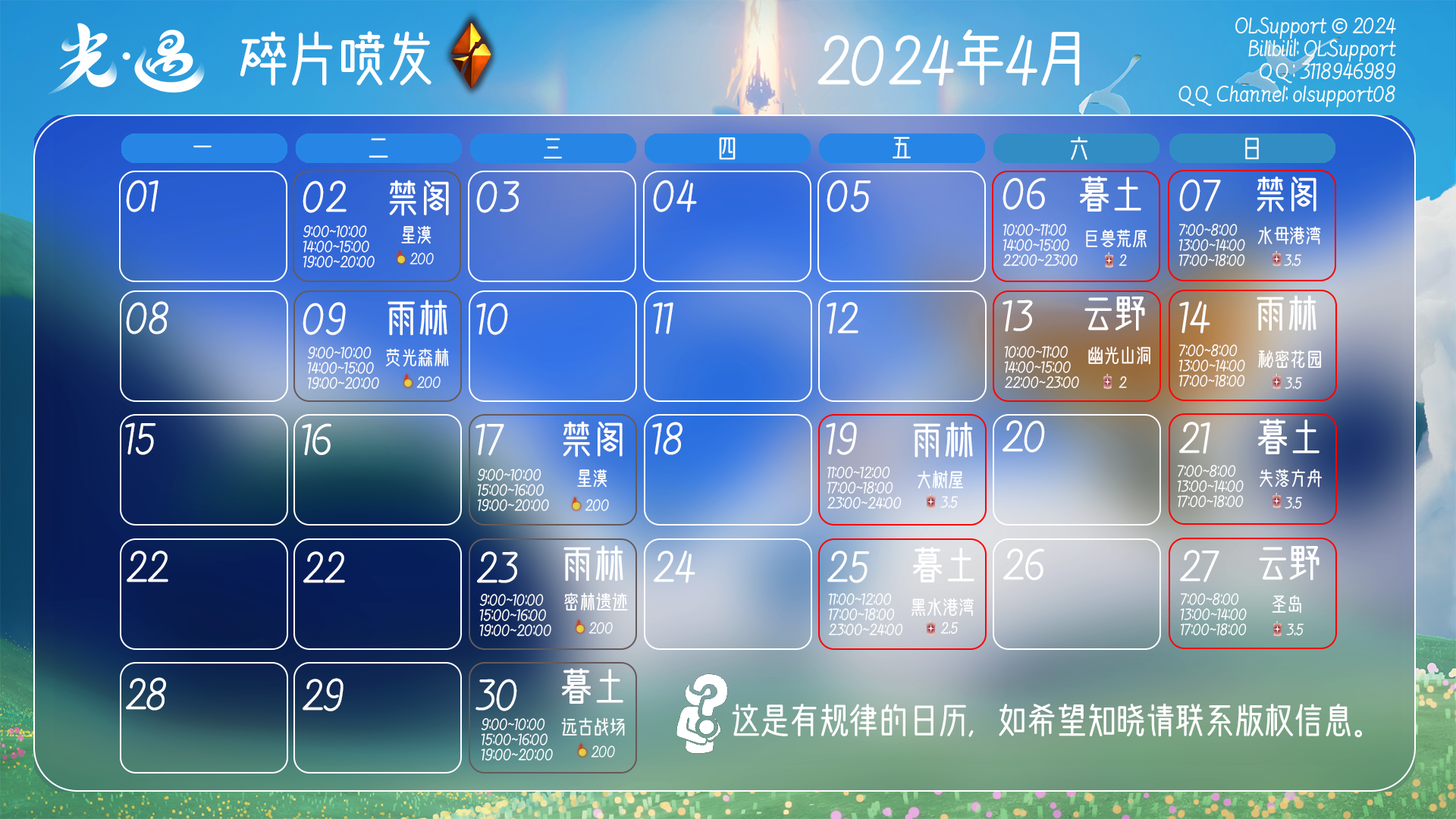
<style>
.page{position:relative;width:1456px;height:819px}
.page>*{position:absolute;margin:0}
.t1{font:19px/22.7px "WenCang-Regular";color:#ffffff}
.t2{font:59.9px "WenCang-Regular";color:#ffffff}
.t3{font:57.9px "WenCang-Regular";color:#ffffff}
.t4{font:25px "WenCang-Regular";color:#ffffff}
.t5{font:37.9px "WenCang-Regular";color:#ffffff}
.t6{font:13.6px/15.2px "WenCang-Regular";color:#ffffff}
.t7{font:19px "WenCang-Regular";color:#ffffff}
.t8{font:13.6px "WenCang-Regular";color:#ffffff}
.t9{font:34.9px "WenCang-Regular";color:#ffffff}
</style>
<div class="page">
<p class="t1" style="left:1178px;top:17px;width:218px;height:91px;text-align:right">OLSupport © 2024<br>Bilibili|: OLSupport<br>QQ: 3118946989<br>QQ Channel: olsupport08</p>
<p class="t2" style="left:817px;top:30px;width:263px;height:56px">2024年4月</p>
<p class="t3" style="left:240px;top:31px;width:191px;height:55px">碎片喷发</p>
<p class="t4" style="left:719px;top:137px;width:17px;height:23px">四</p>
<p class="t4" style="left:893px;top:136px;width:18px;height:22px">五</p>
<p class="t4" style="left:1071px;top:136px;width:16px;height:24px">六</p>
<p class="t4" style="left:1245px;top:137px;width:14px;height:22px">日</p>
<p class="t4" style="left:193px;top:146px;width:19px;height:2px">一</p>
<p class="t4" style="left:369px;top:138px;width:19px;height:20px">二</p>
<p class="t4" style="left:544px;top:138px;width:18px;height:20px">三</p>
<p class="t5" style="left:126px;top:180px;width:32px;height:32px">01</p>
<p class="t5" style="left:303px;top:180px;width:44px;height:33px">02</p>
<p class="t5" style="left:389px;top:180px;width:60px;height:36px">禁阁</p>
<p class="t5" style="left:476px;top:180px;width:43px;height:33px">03</p>
<p class="t5" style="left:653px;top:180px;width:44px;height:32px">04</p>
<p class="t5" style="left:827px;top:180px;width:44px;height:32px">05</p>
<p class="t5" style="left:1003px;top:177px;width:43px;height:33px">06</p>
<p class="t5" style="left:1080px;top:176px;width:61px;height:36px">暮土</p>
<p class="t5" style="left:1179px;top:179px;width:42px;height:33px">07</p>
<p class="t5" style="left:1257px;top:176px;width:59px;height:36px">禁阁</p>
<p class="t6" style="left:303px;top:225px;width:72px;height:43px">9:00~10:00<br>14:00~15:00<br>19:00~20:00</p>
<p class="t7" style="left:401px;top:225px;width:30px;height:19px">星漠</p>
<p class="t6" style="left:1003px;top:224px;width:75px;height:42px">10:00~11:00<br>14:00~15:00<br>22:00~23:00</p>
<p class="t7" style="left:1086px;top:229px;width:61px;height:19px">巨兽荒原</p>
<p class="t6" style="left:1178px;top:224px;width:67px;height:42px">7:00~8:00<br>13:00~14:00<br>17:00~18:00</p>
<p class="t7" style="left:1257px;top:226px;width:64px;height:19px">水母港湾</p>
<p class="t8" style="left:1119px;top:254px;width:8px;height:12px">2</p>
<p class="t8" style="left:1284px;top:254px;width:17px;height:12px">3.5</p>
<p class="t5" style="left:126px;top:301px;width:42px;height:33px">08</p>
<p class="t5" style="left:303px;top:302px;width:43px;height:33px">09</p>
<p class="t5" style="left:388px;top:300px;width:59px;height:36px">雨林</p>
<p class="t5" style="left:476px;top:303px;width:32px;height:32px">10</p>
<p class="t5" style="left:653px;top:302px;width:20px;height:32px">11</p>
<p class="t5" style="left:827px;top:302px;width:31px;height:32px">12</p>
<p class="t5" style="left:1003px;top:300px;width:30px;height:32px">13</p>
<p class="t5" style="left:1084px;top:297px;width:61px;height:34px">云野</p>
<p class="t5" style="left:1179px;top:301px;width:31px;height:33px">14</p>
<p class="t5" style="left:1257px;top:295px;width:59px;height:36px">雨林</p>
<p class="t6" style="left:307px;top:347px;width:72px;height:42px">9:00~10:00<br>14:00~15:00<br>19:00~20:00</p>
<p class="t7" style="left:386px;top:348px;width:63px;height:19px">荧光森林</p>
<p class="t6" style="left:1004px;top:346px;width:75px;height:42px">10:00~11:00<br>14:00~15:00<br>22:00~23:00</p>
<p class="t7" style="left:1088px;top:347px;width:62px;height:18px">幽光山洞</p>
<p class="t6" style="left:1178px;top:344px;width:67px;height:43px">7:00~8:00<br>13:00~14:00<br>17:00~18:00</p>
<p class="t7" style="left:1258px;top:350px;width:64px;height:19px">秘密花园</p>
<p class="t8" style="left:1119px;top:376px;width:8px;height:12px">2</p>
<p class="t8" style="left:1285px;top:377px;width:17px;height:12px">3.5</p>
<p class="t5" style="left:125px;top:422px;width:31px;height:33px">15</p>
<p class="t5" style="left:302px;top:423px;width:29px;height:33px">16</p>
<p class="t5" style="left:475px;top:423px;width:29px;height:33px">17</p>
<p class="t5" style="left:563px;top:421px;width:60px;height:36px">禁阁</p>
<p class="t5" style="left:652px;top:422px;width:30px;height:33px">18</p>
<p class="t5" style="left:826px;top:422px;width:31px;height:33px">19</p>
<p class="t5" style="left:913px;top:422px;width:60px;height:36px">雨林</p>
<p class="t5" style="left:1003px;top:420px;width:42px;height:33px">20</p>
<p class="t5" style="left:1179px;top:422px;width:31px;height:32px">21</p>
<p class="t5" style="left:1258px;top:419px;width:61px;height:35px">暮土</p>
<p class="t6" style="left:477px;top:469px;width:72px;height:42px">9:00~10:00<br>15:00~16:00<br>19:00~20:00</p>
<p class="t7" style="left:577px;top:469px;width:30px;height:19px">星漠</p>
<p class="t6" style="left:827px;top:466px;width:75px;height:43px">11:00~12:00<br>17:00~18:00<br>23:00~24:00</p>
<p class="t7" style="left:918px;top:470px;width:45px;height:19px">大树屋</p>
<p class="t6" style="left:1177px;top:465px;width:67px;height:42px">7:00~8:00<br>13:00~14:00<br>17:00~18:00</p>
<p class="t7" style="left:1260px;top:469px;width:62px;height:19px">失落方舟</p>
<p class="t8" style="left:940px;top:496px;width:18px;height:12px">3.5</p>
<p class="t8" style="left:1285px;top:497px;width:17px;height:12px">3.5</p>
<p class="t5" style="left:563px;top:545px;width:60px;height:37px">雨林</p>
<p class="t5" style="left:1259px;top:546px;width:60px;height:34px">云野</p>
<p class="t5" style="left:127px;top:551px;width:41px;height:31px">22</p>
<p class="t5" style="left:303px;top:551px;width:42px;height:32px">22</p>
<p class="t5" style="left:477px;top:551px;width:41px;height:32px">23</p>
<p class="t5" style="left:654px;top:551px;width:41px;height:32px">24</p>
<p class="t5" style="left:827px;top:551px;width:43px;height:32px">25</p>
<p class="t5" style="left:913px;top:547px;width:61px;height:35px">暮土</p>
<p class="t5" style="left:1003px;top:548px;width:41px;height:32px">26</p>
<p class="t5" style="left:1180px;top:550px;width:39px;height:32px">27</p>
<p class="t6" style="left:479px;top:594px;width:72px;height:42px">9:00~10:00<br>15:00~16:00<br>19:00~20:00</p>
<p class="t7" style="left:564px;top:592px;width:64px;height:19px">密林遗迹</p>
<p class="t6" style="left:828px;top:593px;width:75px;height:42px">11:00~12:00<br>17:00~18:00<br>23:00~24:00</p>
<p class="t6" style="left:1180px;top:593px;width:67px;height:42px">7:00~8:00<br>13:00~14:00<br>17:00~18:00</p>
<p class="t7" style="left:912px;top:598px;width:62px;height:19px">黑水港湾</p>
<p class="t7" style="left:1272px;top:595px;width:29px;height:18px">圣岛</p>
<p class="t8" style="left:940px;top:622px;width:19px;height:12px">2.5</p>
<p class="t8" style="left:1286px;top:623px;width:18px;height:12px">3.5</p>
<p class="t5" style="left:126px;top:677px;width:40px;height:34px">28</p>
<p class="t5" style="left:303px;top:678px;width:41px;height:33px">29</p>
<p class="t5" style="left:562px;top:668px;width:61px;height:36px">暮土</p>
<p class="t5" style="left:475px;top:679px;width:42px;height:32px">30</p>
<p class="t9" style="left:732px;top:703px;width:630px;height:35px">这是有规律的日历，如希望知晓请联系版权信息。</p>
<p class="t6" style="left:481px;top:718px;width:72px;height:43px">9:00~10:00<br>15:00~16:00<br>19:00~20:00</p>
<p class="t7" style="left:561px;top:717px;width:64px;height:19px">远古战场</p>
</div>
